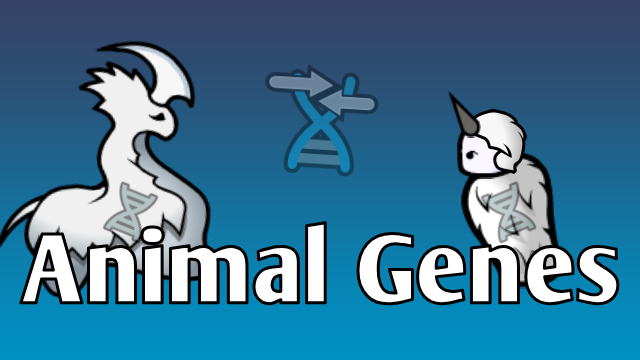
<style>
.page{position:relative;width:640px;height:360px}
.page>*{position:absolute;margin:0}
.t1{font:96px "ArmWrestler-Bold";color:#ffffff}
</style>
<div class="page">
<p class="t1" style="left:18px;top:220px;width:602px;height:86px">Animal Genes</p>
</div>
